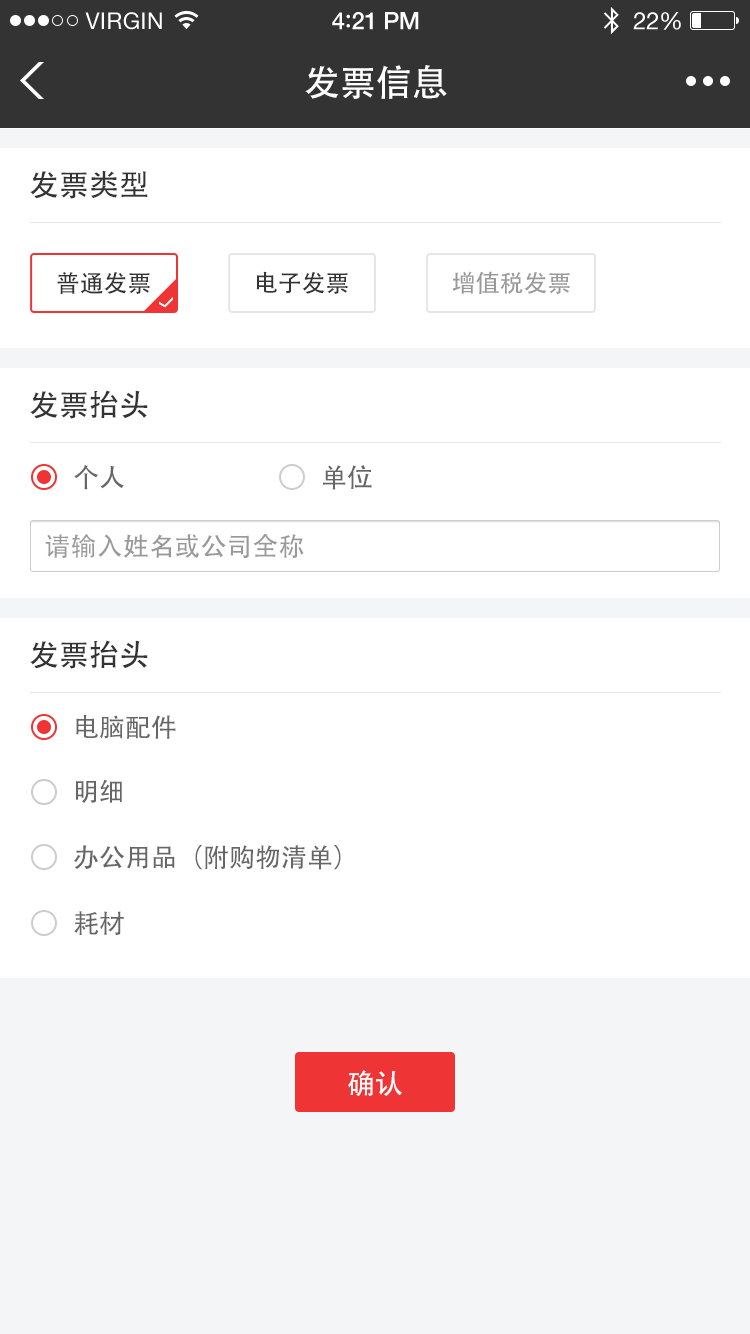
<style>
.page{position:relative;width:750px;height:1334px;background:#ffffff}
.page>*{position:absolute;margin:0}
.t1{font:36px "AdobeHeitiStd-Regular";color:#ffffff}
.t2{font:30px "AdobeHeitiStd-Regular";color:#333333}
.t3{font:24px "AdobeHeitiStd-Regular";color:#333333}
.t4{font:24px "AdobeHeitiStd-Regular";color:#999999}
.t5{font:26px "AdobeHeitiStd-Regular";color:#666666}
.t6{font:26px "AdobeHeitiStd-Regular";color:#999999}
.t7{font:28px "AdobeHeitiStd-Regular";color:#ffffff}
</style>
<div class="page">
<p class="t1" style="left:305px;top:65px;width:142px;height:34px">发票信息</p>
<p class="t2" style="left:30px;top:171px;width:118px;height:28px">发票类型</p>
<p class="t3" style="left:57px;top:272px;width:93px;height:22px">普通发票</p>
<p class="t3" style="left:256px;top:271px;width:92px;height:23px">电子发票</p>
<p class="t4" style="left:452px;top:271px;width:118px;height:23px">增值税发票</p>
<p class="t2" style="left:30px;top:390px;width:118px;height:29px">发票抬头</p>
<p class="t5" style="left:74px;top:465px;width:50px;height:25px">个人</p>
<p class="t5" style="left:323px;top:465px;width:49px;height:25px">单位</p>
<p class="t6" style="left:45px;top:533px;width:259px;height:25px">请输入姓名或公司全称</p>
<p class="t2" style="left:30px;top:640px;width:118px;height:29px">发票抬头</p>
<p class="t5" style="left:76px;top:715px;width:100px;height:24px">电脑配件</p>
<p class="t5" style="left:76px;top:779px;width:46px;height:24px">明细</p>
<p class="t5" style="left:74px;top:845px;width:267px;height:25px">办公用品（附购物清单）</p>
<p class="t5" style="left:74px;top:911px;width:50px;height:24px">耗材</p>
<p class="t7" style="left:348px;top:1070px;width:54px;height:26px">确认</p>
</div>
